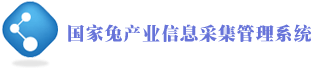
<style>
.page{position:relative;width:320px;height:68px;background:#ffffff}
.page>*{position:absolute;margin:0}
.t1{font:18px "¾­µäÌØËÎ¼ò Regular";letter-spacing:0.05em;color:#6774d9}
</style>
<div class="page">
<p class="t1" style="left:68px;top:24px;width:243px;height:18px">国家兔产业信息采集管理系统</p>
</div>
